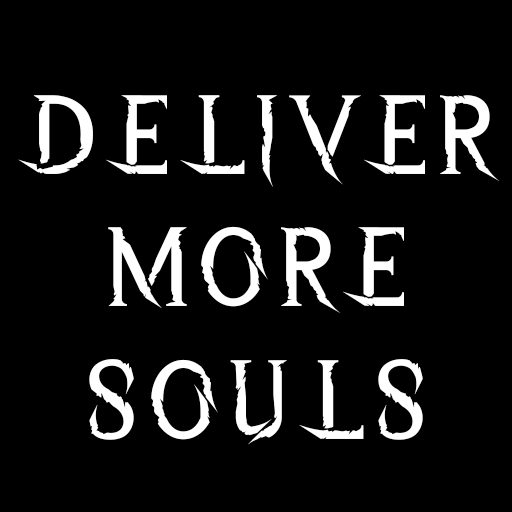
<style>
.page{position:relative;width:512px;height:512px;background:#000000}
.page>*{position:absolute;margin:0}
.t1{font:110.8px "WreckedShipRegular";letter-spacing:0.05em;color:#ffffff}
</style>
<div class="page">
<p class="t1" style="left:18px;top:95px;width:482px;height:350px;text-align:center">DELIVER<br>MORE<br>SOULS</p>
</div>
